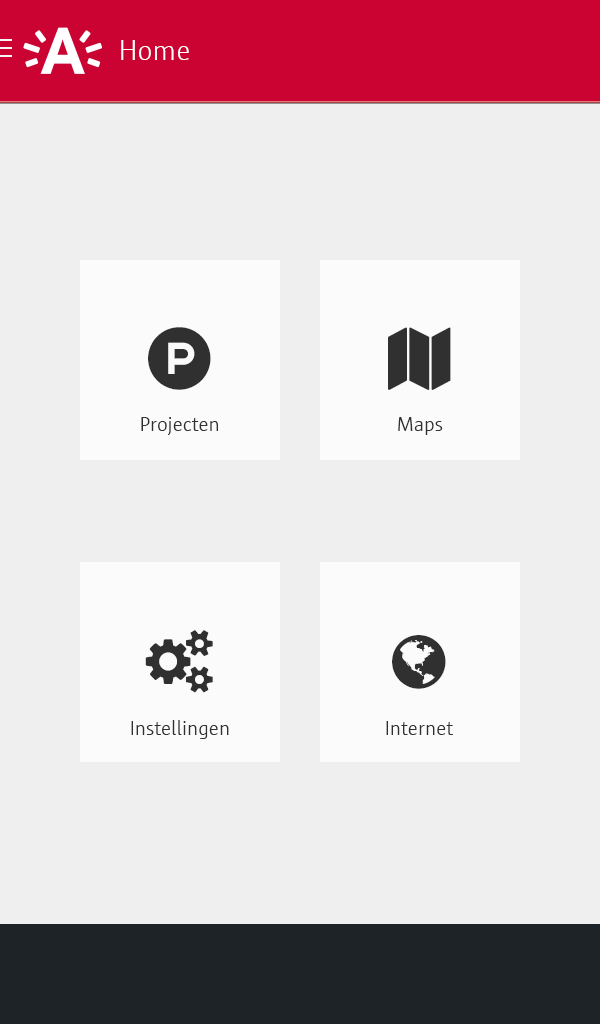
<style>
.page{position:relative;width:600px;height:1024px;background:#efefef}
.page>*{position:absolute;margin:0}
.t1{font:29.2px "SunAntwerpen-Light";color:#ffffff}
.t2{font:20.8px "SunAntwerpen-Light";color:#303030}
</style>
<div class="page">
<p class="t1" style="left:121px;top:40px;width:68px;height:20px">Home</p>
<p class="t2" style="left:141px;top:417px;width:77px;height:18px">Projecten</p>
<p class="t2" style="left:398px;top:417px;width:45px;height:18px">Maps</p>
<p class="t2" style="left:131px;top:720px;width:98px;height:19px">Instellingen</p>
<p class="t2" style="left:386px;top:721px;width:67px;height:14px">Internet</p>
</div>
